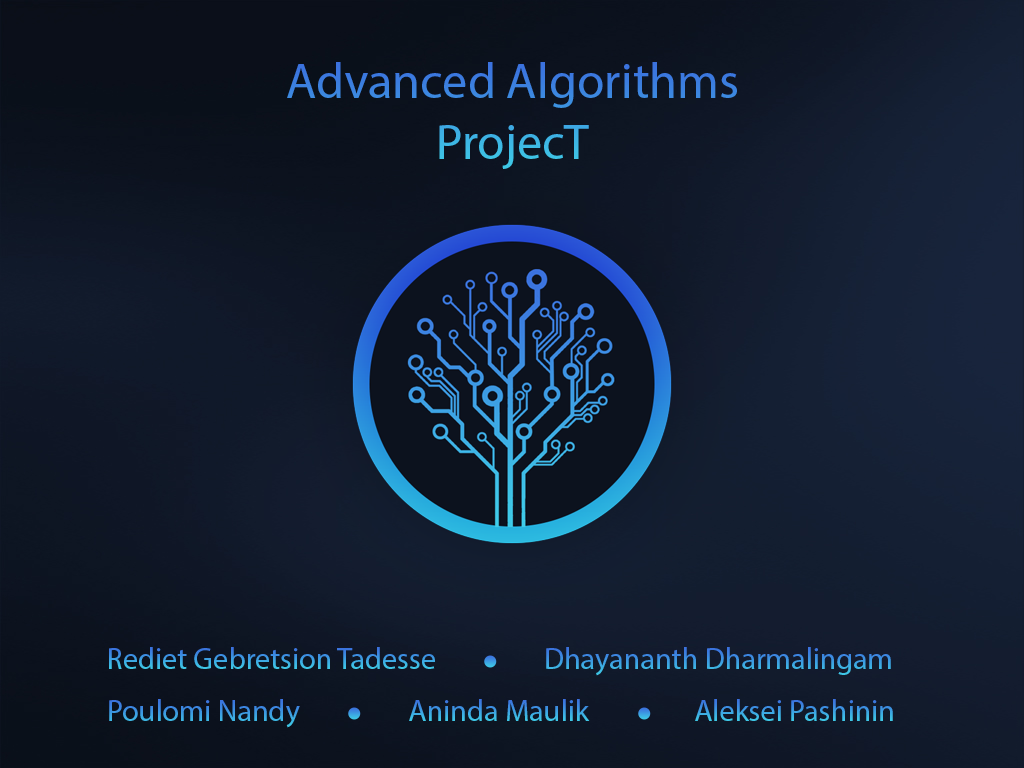
<style>
.page{position:relative;width:1024px;height:768px}
.page>*{position:absolute;margin:0}
.t1{font:50.1px "MyriadPro-Regular";color:#3c82e0}
.t2{font:30.1px "MyriadPro-Regular"}
</style>
<div class="page">
<p class="t1" style="left:287px;top:62px;width:450px;height:107px;text-align:center">Advanced Algorithms<br>ProjecT</p>
<p class="t2" style="left:109px;top:647px;width:326px;height:22px">Rediet Gebretsion Tadesse</p>
<p class="t2" style="left:546px;top:647px;width:345px;height:29px">Dhayananth Dharmalingam</p>
<p class="t2" style="left:109px;top:699px;width:191px;height:29px">Poulomi Nandy</p>
<p class="t2" style="left:409px;top:699px;width:181px;height:22px">Aninda Maulik</p>
<p class="t2" style="left:695px;top:699px;width:198px;height:22px">Aleksei Pashinin</p>
</div>
